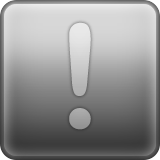
<style>
.page{position:relative;width:160px;height:160px}
.page>*{position:absolute;margin:0}
.t1{font:144px "ArialRoundedMTBold"}
</style>
<div class="page">
<p class="t1" style="left:69px;top:22px;width:22px;height:108px">!</p>
</div>
